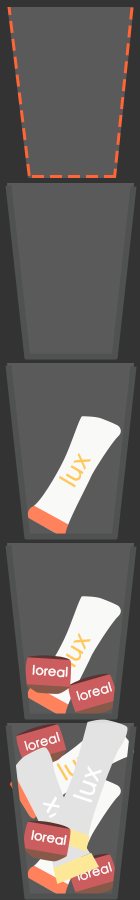
<style>
.page{position:relative;width:140px;height:900px;background:#5a5a5a}
.page>*{position:absolute;margin:0}
.t1{font:24.8px "STHeiti";color:#ffc959;font-weight:bold}
.t2{font:12.6px "STHeiti";color:#ffffff;font-weight:bold}
.t3{font:24.8px "STHeiti";font-weight:bold}
.t4{font:26px "STHeiti";color:#ffffff;font-weight:bold}
</style>
<div class="page">
<p class="t1" style="left:59px;top:453px;width:32px;height:35px;rotate:-59deg">lux</p>
<p class="t1" style="left:59px;top:633px;width:32px;height:35px;rotate:-59deg">lux</p>
<p class="t2" style="left:32px;top:664px;width:36px;height:14px;rotate:3deg">loreal</p>
<p class="t2" style="left:76px;top:681px;width:36px;height:20px;rotate:-17deg">loreal</p>
<p class="t2" style="left:24px;top:731px;width:36px;height:20px;rotate:-17deg">loreal</p>
<p class="t3" style="left:56px;top:752px;width:38px;height:29px;rotate:-31deg">lux</p>
<p class="t4" style="left:73px;top:766px;width:29px;height:37px;rotate:-72deg">lux</p>
<p class="t2" style="left:31px;top:830px;width:36px;height:15px;rotate:10deg">loreal</p>
<p class="t2" style="left:76px;top:861px;width:36px;height:20px;rotate:-17deg">loreal</p>
</div>
